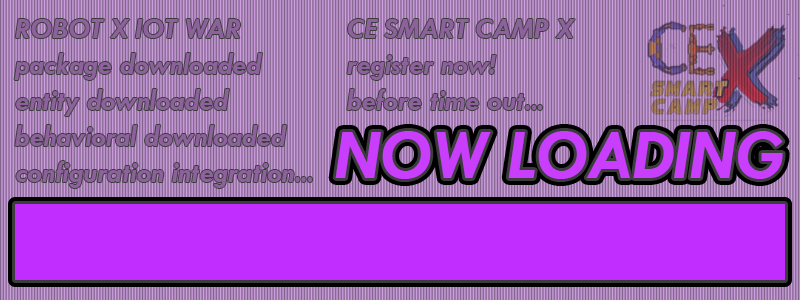
<style>
.page{position:relative;width:800px;height:300px;background:#c12cff}
.page>*{position:absolute;margin:0}
.t1{font:30px "TwCenMT-BoldItalic";color:#8d629c}
.t2{font:72px "TwCenMT-BoldItalic";color:#c93efd}
</style>
<div class="page">
<p class="t1" style="left:14px;top:19px;width:299px;height:169px">ROBOT X IOT WAR<br>package downloaded<br>entity downloaded<br>behavioral downloaded<br>configuration integration...</p>
<p class="t1" style="left:347px;top:19px;width:228px;height:91px">CE SMART CAMP X<br>register now!<br>before time out...</p>
<p class="t2" style="left:335px;top:131px;width:448px;height:48px">NOW LOADING</p>
</div>
